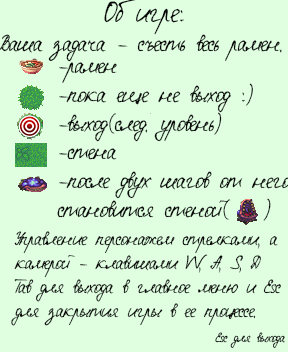
<style>
.page{position:relative;width:288px;height:352px;background:#e0ffe1}
.page>*{position:absolute;margin:0}
.t1{font:24px "Eskal-Font4You";color:#070707}
.t2{font:30px "Eskal-Font4You";color:#070707}
.t3{font:20px "Eskal-Font4You";color:#070707}
.t4{font:14px "Eskal-Font4You";color:#070807}
</style>
<div class="page">
<p class="t1" style="left:0px;top:0px;width:282px;height:62px;text-align:center"><span class="t2">Об игре:<br></span>Ваша задача - съесть весь рамен.</p>
<p class="t3" style="left:11px;top:231px;width:270px;height:95px">Управление персонажем стрелками, а камерой - клавишами W, A, S, D<br>Tab для выхода в главное меню и Esc для закрытия игры в ее процессе.</p>
<p class="t4" style="left:215px;top:332px;width:70px;height:16px">Esc для выхода</p>
</div>
